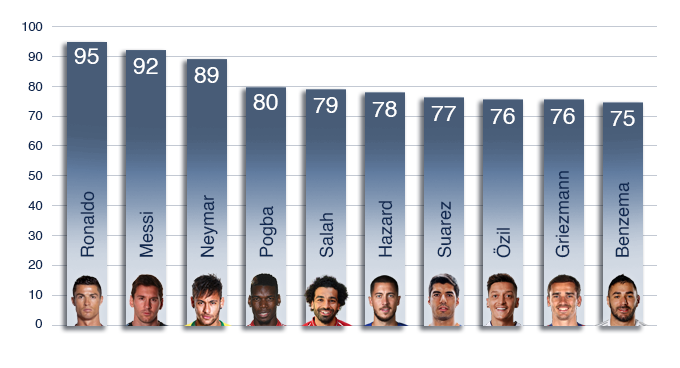
<style>
.page{position:relative;width:680px;height:368px;background:#ffffff}
.page>*{position:absolute;margin:0}
.t1{font:12.7px "Helvetica";color:#0f2850}
.t2{font:22.9px "Helvetica";color:#ffffff}
.t3{font:18px "Helvetica";color:#0f2850}
</style>
<div class="page">
<p class="t1" style="left:22px;top:22px;width:21px;height:9px">100</p>
<p class="t1" style="left:28px;top:52px;width:15px;height:9px">90</p>
<p class="t2" style="left:74px;top:48px;width:25px;height:16px">95</p>
<p class="t2" style="left:133px;top:58px;width:25px;height:16px">92</p>
<p class="t2" style="left:194px;top:67px;width:25px;height:16px">89</p>
<p class="t1" style="left:28px;top:82px;width:15px;height:9px">80</p>
<p class="t2" style="left:253px;top:94px;width:25px;height:16px">80</p>
<p class="t2" style="left:313px;top:97px;width:25px;height:16px">79</p>
<p class="t2" style="left:372px;top:101px;width:25px;height:16px">78</p>
<p class="t1" style="left:28px;top:111px;width:15px;height:9px">70</p>
<p class="t2" style="left:431px;top:106px;width:25px;height:15px">77</p>
<p class="t2" style="left:490px;top:108px;width:25px;height:16px">76</p>
<p class="t2" style="left:550px;top:108px;width:25px;height:16px">76</p>
<p class="t2" style="left:610px;top:110px;width:25px;height:16px">75</p>
<p class="t1" style="left:28px;top:141px;width:15px;height:9px">60</p>
<p class="t1" style="left:28px;top:171px;width:15px;height:9px">50</p>
<p class="t3" style="left:555px;top:171px;width:15px;height:87px;rotate:-90deg">Griezmann</p>
<p class="t3" style="left:615px;top:182px;width:15px;height:75px;rotate:-90deg">Benzema</p>
<p class="t3" style="left:80px;top:191px;width:15px;height:66px;rotate:-90deg">Ronaldo</p>
<p class="t3" style="left:200px;top:195px;width:18px;height:62px;rotate:-90deg">Neymar</p>
<p class="t1" style="left:28px;top:201px;width:15px;height:9px">40</p>
<p class="t3" style="left:259px;top:206px;width:18px;height:51px;rotate:-90deg">Pogba</p>
<p class="t3" style="left:378px;top:201px;width:15px;height:56px;rotate:-90deg">Hazard</p>
<p class="t3" style="left:437px;top:201px;width:15px;height:57px;rotate:-90deg">Suarez</p>
<p class="t3" style="left:139px;top:212px;width:15px;height:45px;rotate:-90deg">Messi</p>
<p class="t3" style="left:319px;top:213px;width:15px;height:45px;rotate:-90deg">Salah</p>
<p class="t1" style="left:28px;top:231px;width:15px;height:9px">30</p>
<p class="t3" style="left:493px;top:228px;width:18px;height:30px;rotate:-90deg">Özil</p>
<p class="t1" style="left:28px;top:260px;width:15px;height:9px">20</p>
<p class="t1" style="left:29px;top:290px;width:14px;height:9px">10</p>
<p class="t1" style="left:35px;top:319px;width:7px;height:9px">0</p>
</div>
